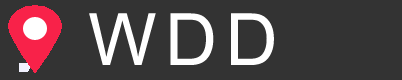
<style>
.page{position:relative;width:402px;height:80px;background:#333333}
.page>*{position:absolute;margin:0}
.t1{font:72px "ArialMT";letter-spacing:0.12em;color:#ffffff;text-transform:uppercase}
</style>
<div class="page">
<p class="t1" style="left:89px;top:13px;width:185px;height:52px">wdd</p>
</div>
